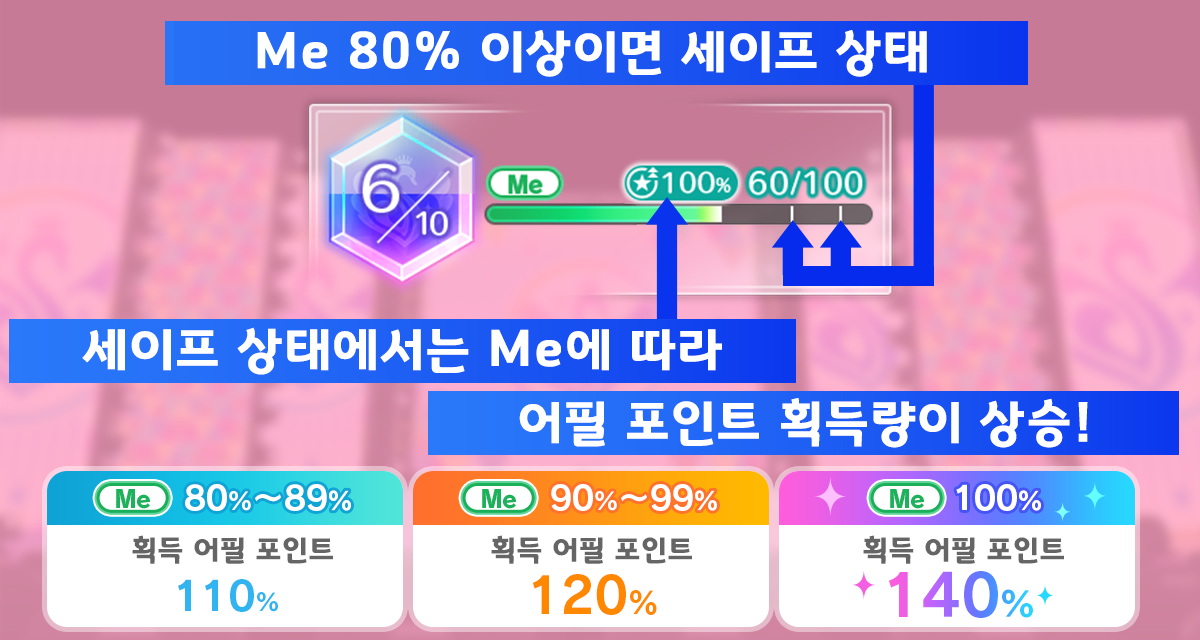
<style>
.page{position:relative;width:1200px;height:640px}
.page>*{position:absolute;margin:0}
.t1{font:50.7px "GyeonggiTitleB";letter-spacing:0.05em;color:#ffffff}
.t2{font:29.3px "GyeonggiTitleB";letter-spacing:0.05em;color:#656565}
</style>
<div class="page">
<p class="t1" style="left:257px;top:30px;width:670px;height:47px">Me 80% 이상이면 세이프 상태</p>
<p class="t1" style="left:82px;top:327px;width:640px;height:48px">세이프 상태에서는 Me에 따라</p>
<p class="t1" style="left:519px;top:398px;width:569px;height:50px">어필 포인트 획득량이 상승!</p>
<p class="t2" style="left:132px;top:535px;width:201px;height:29px">획득 어필 포인트</p>
<p class="t2" style="left:491px;top:535px;width:201px;height:29px">획득 어필 포인트</p>
<p class="t2" style="left:863px;top:535px;width:201px;height:29px">획득 어필 포인트</p>
</div>
